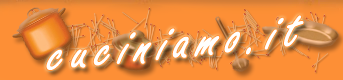
<style>
.page{position:relative;width:343px;height:80px;background:#fd8f36}
.page>*{position:absolute;margin:0}
.t1{font:60px "FreestyleScript-Regular";letter-spacing:0.1em;color:#ffffff;font-weight:bold;font-style:italic}
</style>
<div class="page">
<p class="t1" style="left:46px;top:15px;width:258px;height:55px;rotate:-6deg">cuciniamo.it</p>
</div>
